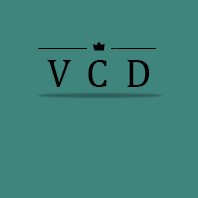
<style>
.page{position:relative;width:198px;height:198px;background:#3f857e}
.page>*{position:absolute;margin:0}
.t1{font:40px "CambriaMath";letter-spacing:0.4em;color:#000000}
</style>
<div class="page">
<p class="t1" style="left:47px;top:60px;width:103px;height:27px">VCD</p>
</div>
